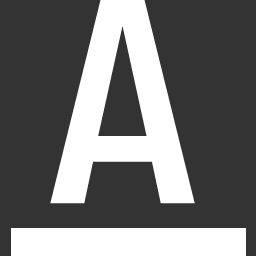
<style>
.page{position:relative;width:256px;height:256px;background:#333333}
.page>*{position:absolute;margin:0}
.t1{font:314.5px "Milcone-Regular";color:#ffffff}
</style>
<div class="page">
<p class="t1" style="left:50px;top:0px;width:145px;height:204px">A</p>
</div>
